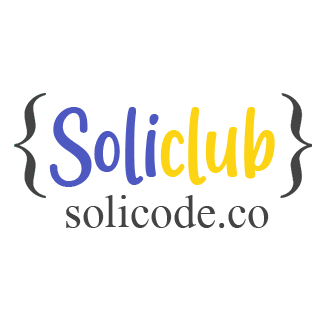
<style>
.page{position:relative;width:320px;height:320px;background:#ffffff}
.page>*{position:absolute;margin:0}
.t1{font:94px "LadyNature";color:#4d58c1}
.t2{font:94px "LadyNature";color:#fdd414}
.t3{font:69px "AngsanaNew";color:#444444}
</style>
<div class="page">
<p class="t1" style="left:49px;top:107px;width:226px;height:80px">Soli<span class="t2">club</span></p>
<p class="t3" style="left:66px;top:195px;width:203px;height:33px">solicode.co</p>
</div>
